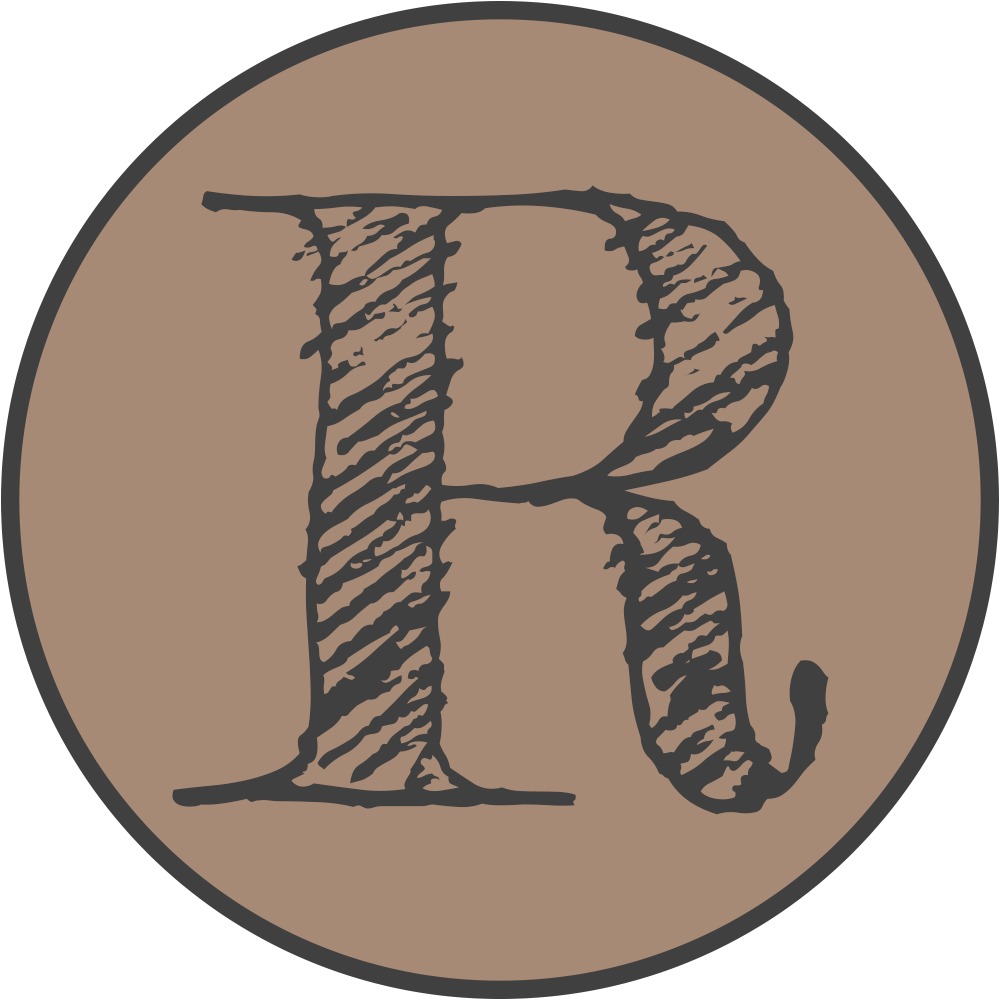
<style>
.page{position:relative;width:1000px;height:1000px;background:#a78a75}
.page>*{position:absolute;margin:0}
.t1{font:832.6px "FrederickatheGreat-Regular";color:#404040}
</style>
<div class="page">
<p class="t1" style="left:172px;top:185px;width:657px;height:630px">R</p>
</div>
